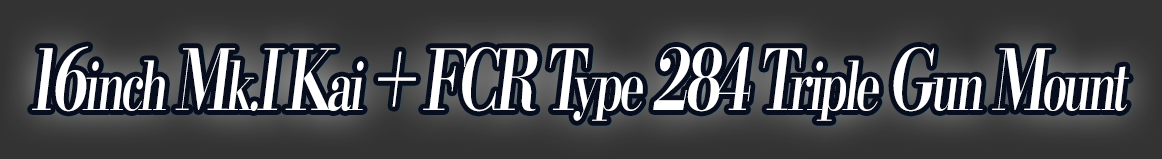
<style>
.page{position:relative;width:1162px;height:159px}
.page>*{position:absolute;margin:0}
.t1{font:84px "KochoStd-Heavy";letter-spacing:-0.08em;color:#ffffff;font-style:italic;scale:0.68 1}
.t2{font:67.2px "KochoStd-Heavy";letter-spacing:-0.08em;color:#ffffff;font-style:italic;scale:0.68 1}
</style>
<div class="page">
<p class="t1" style="left:32px;top:46px;width:1097px;height:75px">16<span class="t2">inch </span>M<span class="t2">k.</span>I K<span class="t2">ai </span>+ FCR T<span class="t2">ype </span>284 T<span class="t2">riple </span>G<span class="t2">un </span>M<span class="t2">ount</span></p>
</div>
